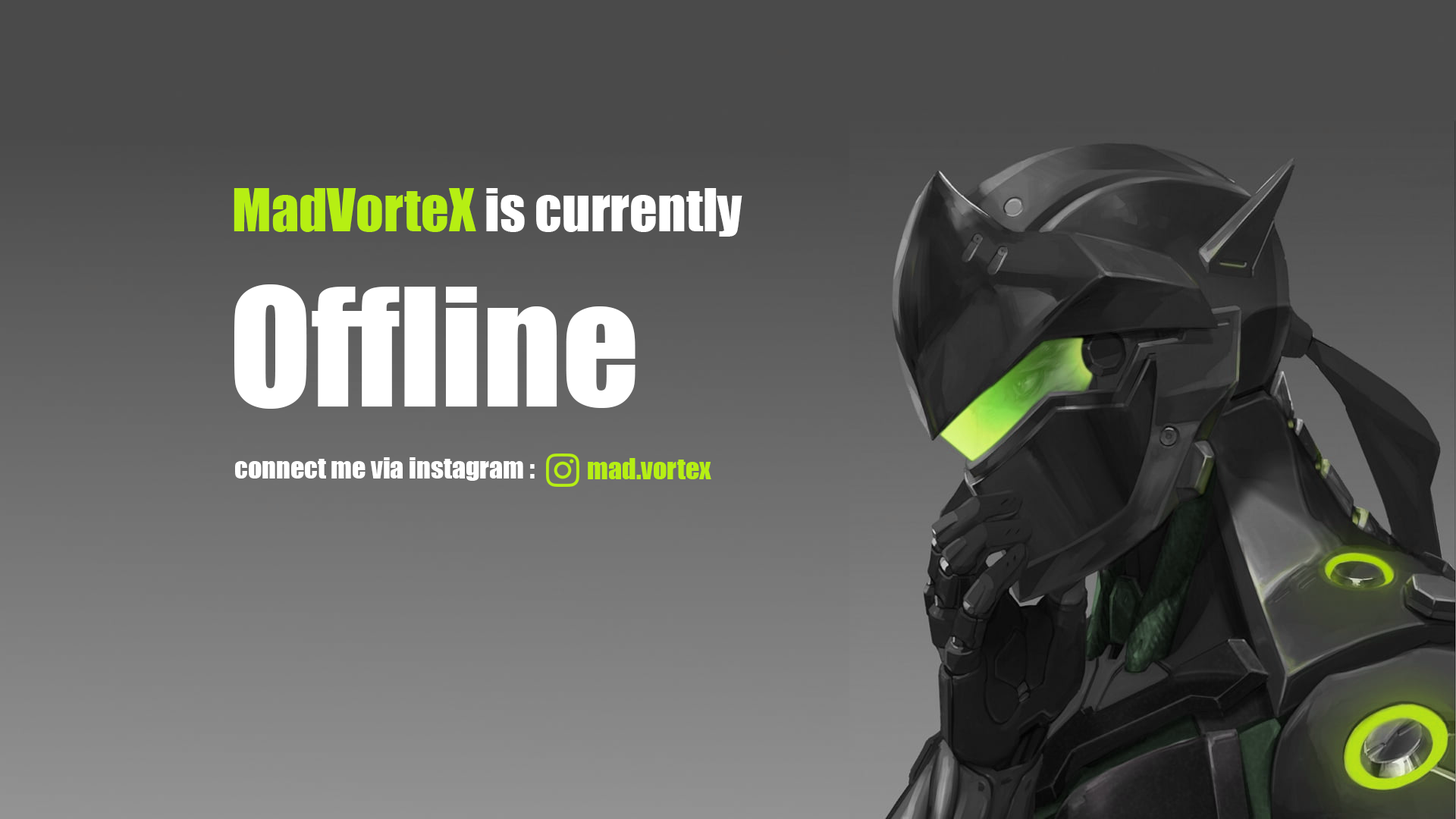
<style>
.page{position:relative;width:1456px;height:819px}
.page>*{position:absolute;margin:0}
.t1{font:54.6px "Impact";color:#ffffff}
.t2{font:54.6px "Impact";color:#b6ef13}
.t3{font:151.7px "Impact";color:#ffffff}
.t4{font:27.3px "Impact";color:#ffffff}
.t5{font:27.3px "Impact";color:#b6ef13}
</style>
<div class="page">
<p class="t1" style="left:234px;top:188px;width:508px;height:49px"><span class="t2">MadVorteX </span>is currently</p>
<p class="t3" style="left:234px;top:284px;width:401px;height:125px">Offline</p>
<p class="t4" style="left:235px;top:457px;width:300px;height:24px">: connect me via instagram</p>
<p class="t5" style="left:588px;top:458px;width:123px;height:21px">mad.vortex</p>
</div>
